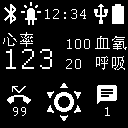
<style>
.page{position:relative;width:128px;height:128px;background:#000000}
.page>*{position:absolute;margin:0}
.t1{font:16px "Courier";color:#ffffff}
.t2{font:16px "AdobeHeitiStd-Regular";color:#ffffff}
.t3{font:32px "Courier";color:#ffffff}
.t4{font:8px "Courier";color:#ffffff}
</style>
<div class="page">
<p class="t1" style="left:45px;top:9px;width:41px;height:10px">12:34</p>
<p class="t2" style="left:3px;top:32px;width:30px;height:15px">心率</p>
<p class="t1" style="left:67px;top:39px;width:23px;height:10px">100</p>
<p class="t2" style="left:95px;top:36px;width:32px;height:14px">血氧</p>
<p class="t3" style="left:6px;top:49px;width:46px;height:20px">123</p>
<p class="t1" style="left:66px;top:59px;width:15px;height:10px">20</p>
<p class="t2" style="left:96px;top:56px;width:29px;height:14px">呼吸</p>
<p class="t4" style="left:13px;top:107px;width:13px;height:9px">99</p>
<p class="t4" style="left:105px;top:107px;width:5px;height:9px">1</p>
</div>
